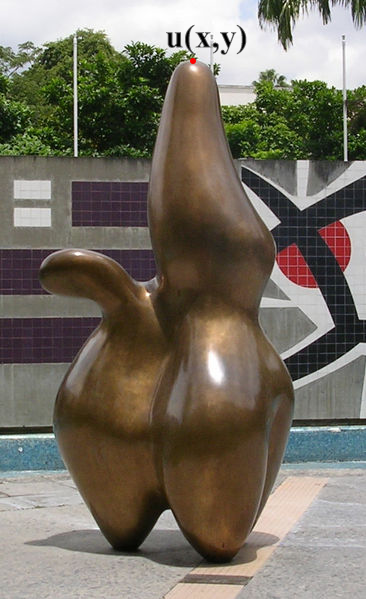
<style>
.page{position:relative;width:366px;height:599px}
.page>*{position:absolute;margin:0}
.t1{font:33.3px "TimesNewRomanPS-BoldMT"}
</style>
<div class="page">
<p class="t1" style="left:166px;top:24px;width:81px;height:31px">u(x,y)</p>
</div>
